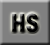
<style>
.page{position:relative;width:50px;height:45px;background:#808080}
.page>*{position:absolute;margin:0}
.t1{font:24px "GothicXB-HM"}
</style>
<div class="page">
<p class="t1" style="left:12px;top:13px;width:26px;height:19px">HS</p>
</div>
